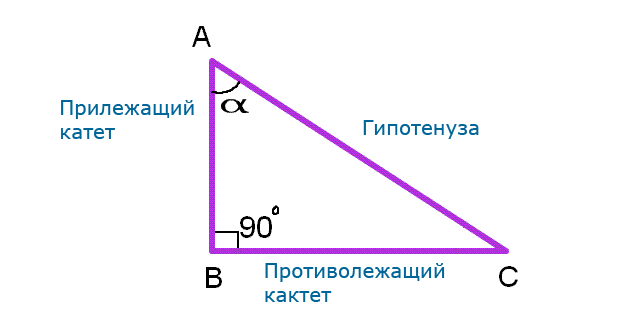
<style>
.page{position:relative;width:635px;height:334px;background:#ffffff}
.page>*{position:absolute;margin:0}
.t1{font:20px "Verdana";color:#006699}
</style>
<div class="page">
<p class="t1" style="left:61px;top:100px;width:133px;height:39px">Прилежащий<br>катет</p>
<p class="t1" style="left:363px;top:120px;width:116px;height:19px">Гипотенуза</p>
<p class="t1" style="left:265px;top:263px;width:180px;height:39px">Противолежащий <br>кактет</p>
</div>
